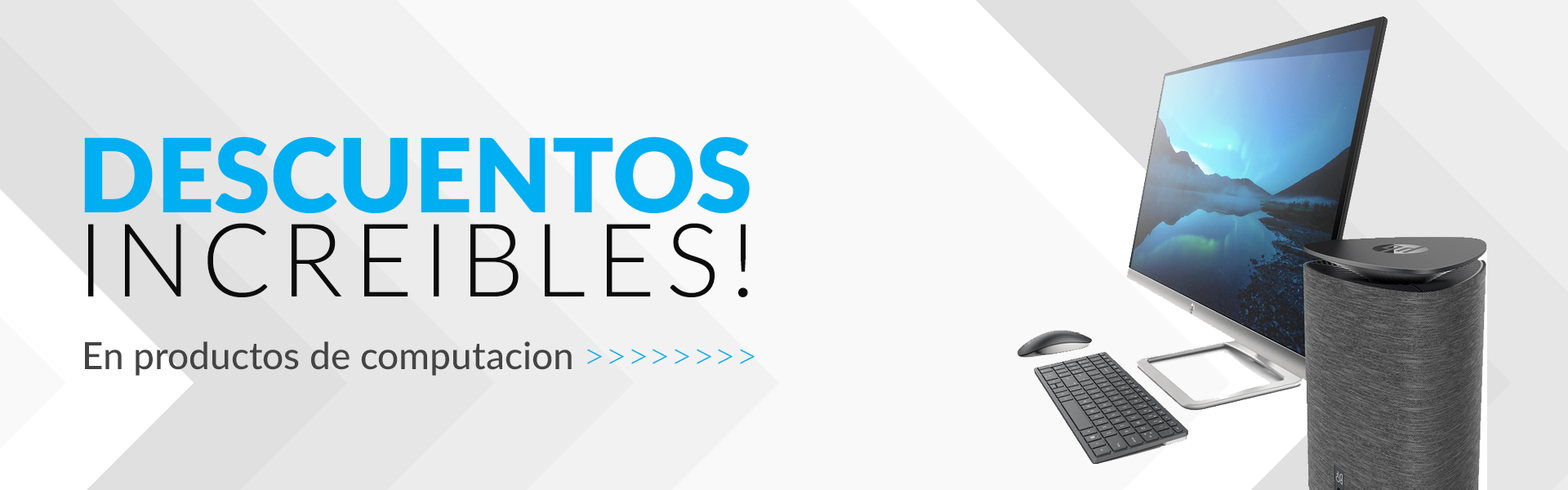
<style>
.page{position:relative;width:1568px;height:490px;background:#f9f9f9}
.page>*{position:absolute;margin:0}
.t1{font:102.1px "Lato-Black";color:#00aff2}
.t2{font:102.1px "Lato-Light";letter-spacing:0.1em;color:#0c0c0c}
.t3{font:37.6px "Lato-Medium";color:#444444}
.t4{font:37.6px "Lato-Light";color:#00aff2}
</style>
<div class="page">
<p class="t1" style="left:84px;top:136px;width:666px;height:77px">DESCUENTOS</p>
<p class="t2" style="left:88px;top:223px;width:660px;height:74px">INCREIBLES!</p>
<p class="t3" style="left:85px;top:341px;width:670px;height:35px">En productos de computacion <span class="t4">&gt;&gt;&gt;&gt;&gt;&gt;&gt;&gt;</span></p>
</div>
